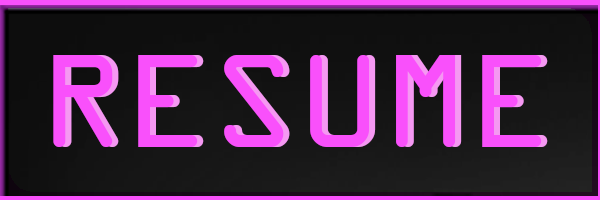
<style>
.page{position:relative;width:600px;height:200px}
.page>*{position:absolute;margin:0}
.t1{font:142px "OCRAExtended";color:#f950fb}
.t2{font:142px "OCRAExtended"}
</style>
<div class="page">
<p class="t1" style="left:53px;top:55px;width:489px;height:92px">RESUME</p>
<p class="t2" style="left:59px;top:55px;width:489px;height:92px">RESUME</p>
</div>
